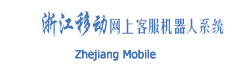
<style>
.page{position:relative;width:232px;height:66px;background:#ffffff}
.page>*{position:absolute;margin:0}
.t1{font:16px "FZYTK--GBK1-0";letter-spacing:-0.2em;color:#4477b8}
.t2{font:28.8px "STXingkai";letter-spacing:-0.1em;color:#4477b8;scale:0.67 1}
.t3{font:11px "Tahoma";color:#4477b8;font-weight:bold}
</style>
<div class="page">
<p class="t1" style="left:42px;top:11px;width:182px;height:26px"><span class="t2">浙江移动</span>网上客服机器人系统</p>
<p class="t3" style="left:75px;top:49px;width:81px;height:12px">Zhejiang Mobile</p>
</div>
